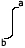
<style>
.page{position:relative;width:25px;height:48px;background:#ffffff}
.page>*{position:absolute;margin:0}
.t1{font:9px "Tahoma";color:#000000}
</style>
<div class="page">
<p class="t1" style="left:18px;top:0px;width:5px;height:7px">a</p>
<p class="t1" style="left:1px;top:38px;width:5px;height:8px">b</p>
</div>
